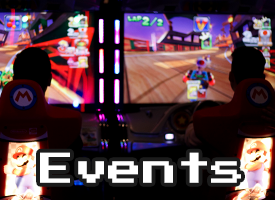
<style>
.page{position:relative;width:275px;height:200px}
.page>*{position:absolute;margin:0}
.t1{font:34.2px "PressStart2P";color:#ffffff}
</style>
<div class="page">
<p class="t1" style="left:40px;top:152px;width:201px;height:31px">Events</p>
</div>
